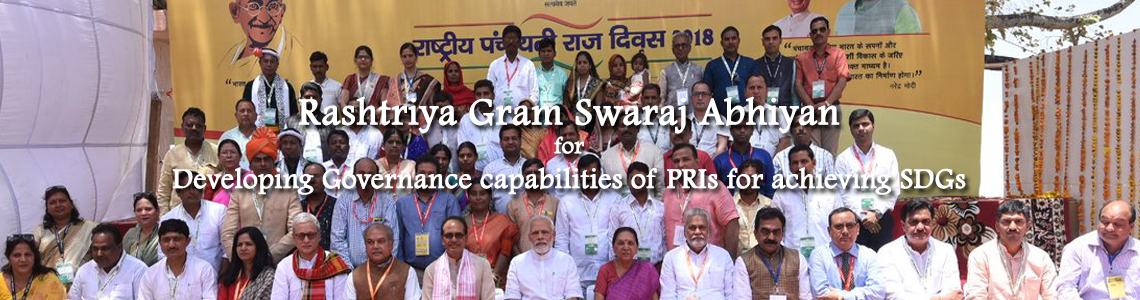
<style>
.page{position:relative;width:1140px;height:300px}
.page>*{position:absolute;margin:0}
.t1{font:29px "FootlightMTLight";color:#ffffff;font-weight:bold}
.t2{font:39px "FootlightMTLight";color:#ffffff;font-weight:bold}
.t3{font:24px "FootlightMTLight";color:#ffffff;font-weight:bold}
</style>
<div class="page">
<p class="t1" style="left:172px;top:96px;width:794px;height:99px;text-align:center"><span class="t2">Rashtriya Gram Swaraj Abhiyan<br></span><span class="t3">for<br></span>Developing Governance capabilities of PRIs for achieving SDGs</p>
</div>
